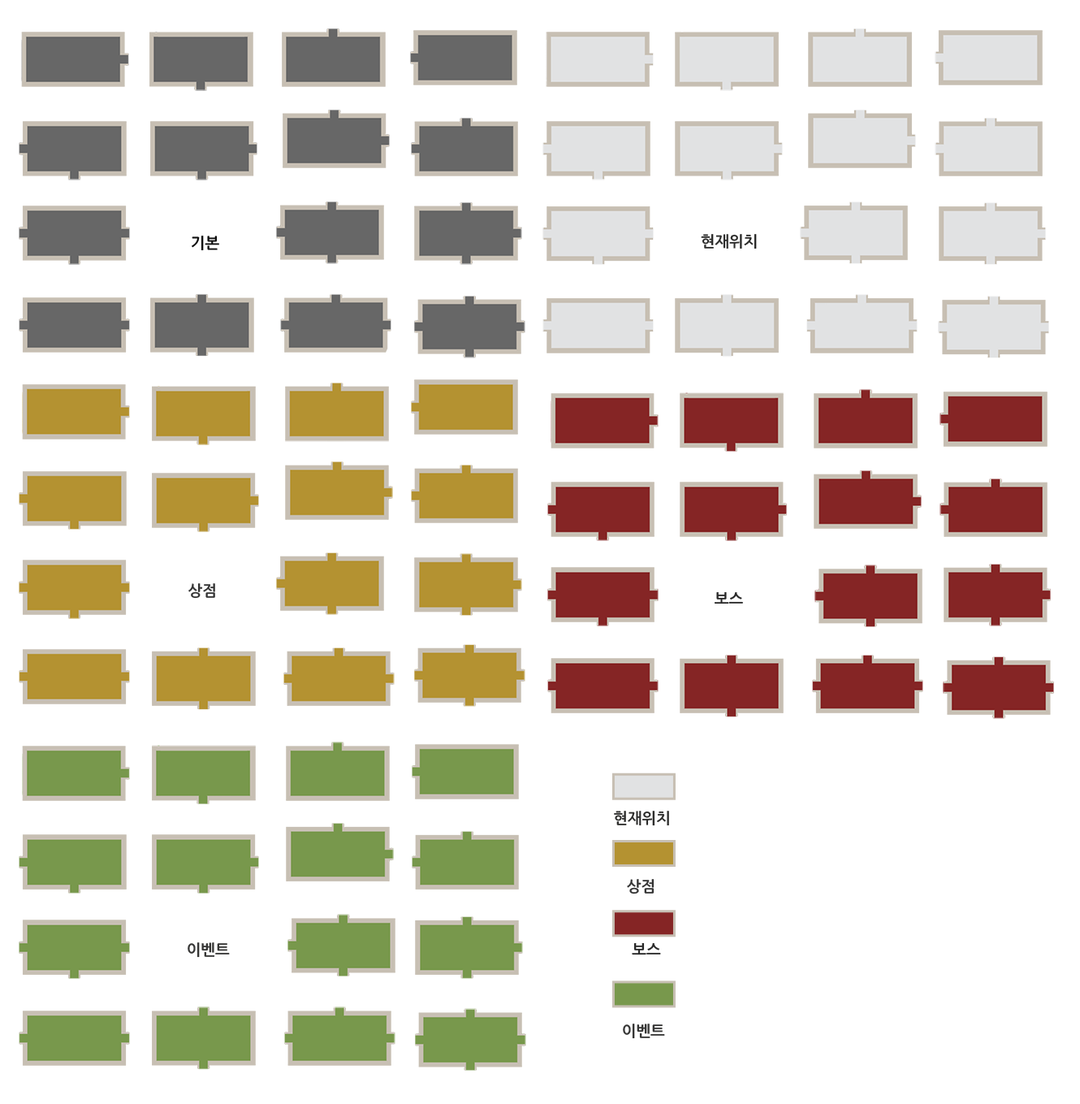
<style>
.page{position:relative;width:1080px;height:1104px;background:#ffffff}
.page>*{position:absolute;margin:0}
.t1{font:15.2px "NanumGothicBold";color:#2c2c2b}
.t2{font:15.2px "NanumGothicBold";color:#0c0c0c}
.t3{font:15.2px "NanumGothicBold";color:#343434}
.t4{font:15.2px "NanumGothicBold";color:#282828}
.t5{font:15.2px "NanumGothicBold";color:#353534}
</style>
<div class="page">
<p class="t1" style="left:701px;top:234px;width:56px;height:15px">현재위치</p>
<p class="t2" style="left:192px;top:236px;width:27px;height:15px">기본</p>
<p class="t3" style="left:188px;top:583px;width:27px;height:16px">상점</p>
<p class="t4" style="left:715px;top:591px;width:28px;height:13px">보스</p>
<p class="t1" style="left:614px;top:811px;width:55px;height:15px">현재위치</p>
<p class="t3" style="left:627px;top:879px;width:28px;height:15px">상점</p>
<p class="t5" style="left:188px;top:942px;width:42px;height:16px">이벤트</p>
<p class="t4" style="left:632px;top:942px;width:29px;height:13px">보스</p>
<p class="t5" style="left:623px;top:1023px;width:42px;height:16px">이벤트</p>
</div>
